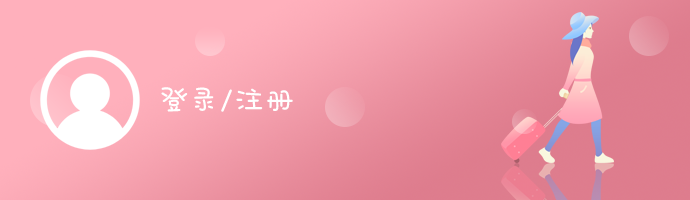
<style>
.page{position:relative;width:690px;height:200px}
.page>*{position:absolute;margin:0}
.t1{font:30px "HYLeMiaoTiJ";color:#ffffff}
</style>
<div class="page">
<p class="t1" style="left:161px;top:87px;width:132px;height:25px">登录/注册</p>
</div>
